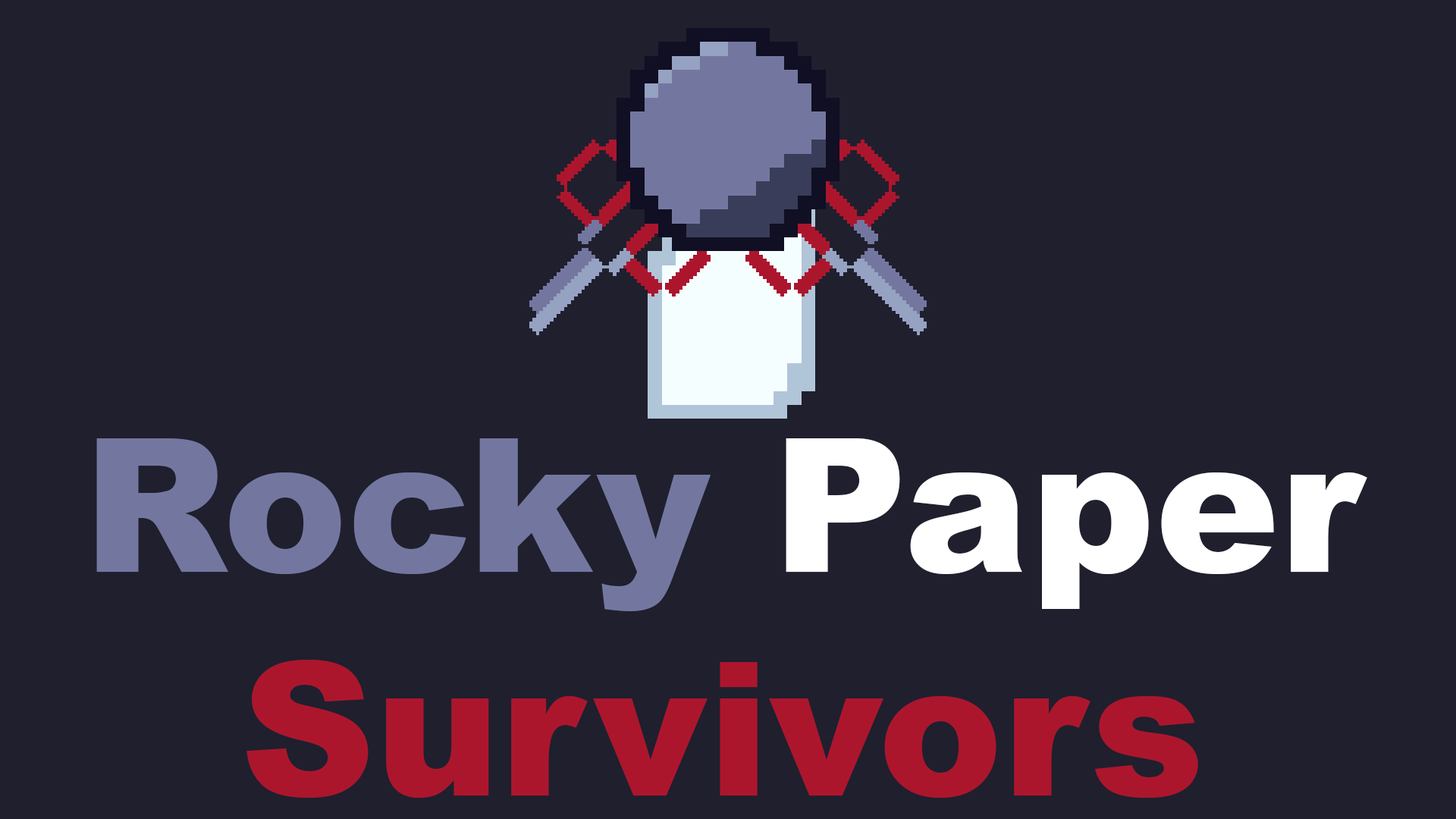
<style>
.page{position:relative;width:1456px;height:819px;background:#1f1f2e}
.page>*{position:absolute;margin:0}
.t1{font:186.5px "Arial-Black";color:#ac162d}
.t2{font:186.5px "Arial-Black";color:#7377a0}
.t3{font:186.5px "Arial-Black";color:#ffffff}
</style>
<div class="page">
<p class="t1" style="left:96px;top:438px;width:1271px;height:360px;text-align:center"><span class="t2">Rocky</span><span class="t3"> Paper<br></span>Survivors</p>
</div>
